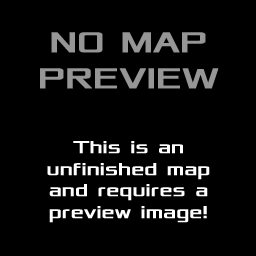
<style>
.page{position:relative;width:256px;height:256px;background:#000000}
.page>*{position:absolute;margin:0}
.t1{font:18px "Xolonium";font-weight:bold}
.t2{font:24px "Xolonium";font-weight:bold}
.t3{font:30px "Xolonium";font-weight:bold}
.t4{font:18px "Xolonium";color:#ffffff;font-weight:bold}
.t5{font:24px "Xolonium";color:#c8e1ff;font-weight:bold}
.t6{font:30px "Xolonium";color:#969696;font-weight:bold}
</style>
<div class="page">
<p class="t1" style="left:40px;top:32px;width:179px;height:191px;text-align:center"><span class="t2"><br></span><span class="t3">NO MAP PREVIEW<br><br><br></span>This is an unfinished map  and requires a preview image!</p>
<p class="t1" style="left:40px;top:32px;width:179px;height:191px;text-align:center"><span class="t2"><br></span><span class="t3">NO MAP PREVIEW<br><br><br></span>This is an unfinished map  and requires a preview image!</p>
<p class="t4" style="left:40px;top:32px;width:179px;height:191px;text-align:center"><span class="t5"><br></span><span class="t6">NO MAP PREVIEW<br><br><br></span>This is an unfinished map  and requires a preview image!</p>
</div>
